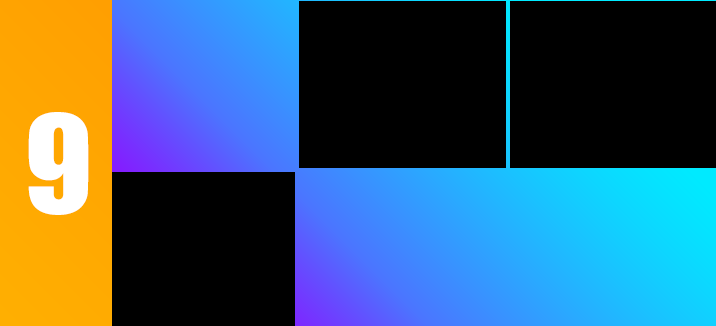
<style>
.page{position:relative;width:716px;height:326px;background:#000000}
.page>*{position:absolute;margin:0}
.t1{font:125px "Impact";color:#ffffff}
</style>
<div class="page">
<p class="t1" style="left:28px;top:112px;width:61px;height:103px">9</p>
</div>
